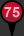
<style>
.page{position:relative;width:24px;height:36px;background:#333333}
.page>*{position:absolute;margin:0}
.t1{font:14.3px "Arial-BoldMT";color:#edb1bc}
</style>
<div class="page">
<p class="t1" style="left:4px;top:7px;width:16px;height:11px">75</p>
</div>
